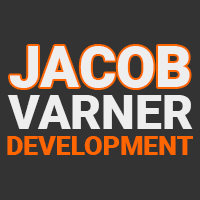
<style>
.page{position:relative;width:200px;height:200px;background:#333333}
.page>*{position:absolute;margin:0}
.t1{font:57px "Roboto-Black";color:#eeeeee}
.t2{font:47.7px "Roboto-Black";color:#eeeeee}
.t3{font:26.6px "Roboto-Black";color:#ff6600}
</style>
<div class="page">
<p class="t1" style="left:10px;top:46px;width:180px;height:42px">JACOB</p>
<p class="t2" style="left:7px;top:95px;width:186px;height:34px">VARNER</p>
<p class="t3" style="left:7px;top:136px;width:186px;height:19px">DEVELOPMENT</p>
</div>
